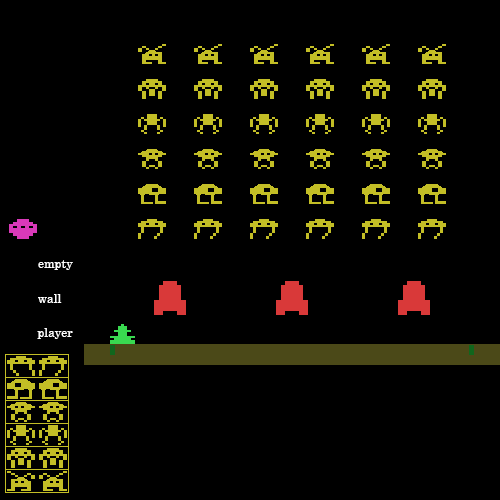
<style>
.page{position:relative;width:500px;height:500px;background:#000000}
.page>*{position:absolute;margin:0}
.t1{font:12px "Century";color:#ffffff}
</style>
<div class="page">
<p class="t1" style="left:38px;top:260px;width:35px;height:10px">empty</p>
<p class="t1" style="left:38px;top:294px;width:24px;height:9px">wall</p>
<p class="t1" style="left:37px;top:328px;width:36px;height:11px">player</p>
</div>
